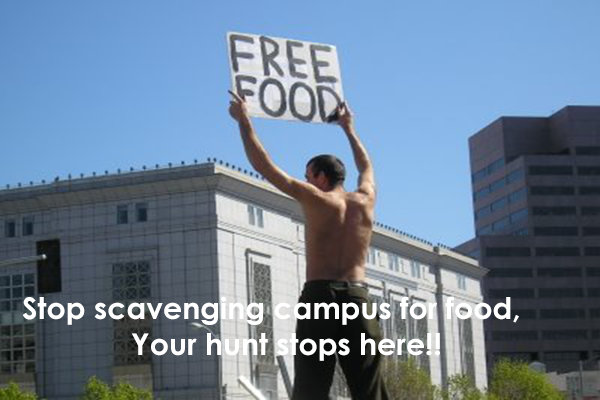
<style>
.page{position:relative;width:600px;height:400px}
.page>*{position:absolute;margin:0}
.t1{font:30px "CenturyGothic-Bold";color:#ffffff}
</style>
<div class="page">
<p class="t1" style="left:22px;top:296px;width:497px;height:65px">Stop scavenging campus for food,<br>             Your hunt stops here!!</p>
</div>
